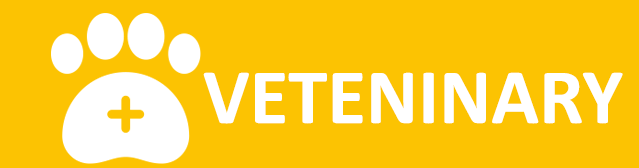
<style>
.page{position:relative;width:639px;height:168px;background:#fcc302}
.page>*{position:absolute;margin:0}
.t1{font:79.1px "Calibri-Bold";color:#ffffff}
</style>
<div class="page">
<p class="t1" style="left:203px;top:72px;width:420px;height:52px">VETENINARY</p>
</div>
